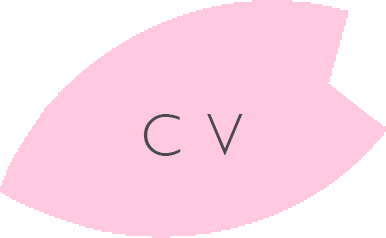
<style>
.page{position:relative;width:386px;height:238px;background:#ffc9df}
.page>*{position:absolute;margin:0}
.t1{font:60px "GillSans-Light";color:#4a4a4a}
</style>
<div class="page">
<p class="t1" style="left:143px;top:114px;width:100px;height:42px">C  V</p>
</div>
